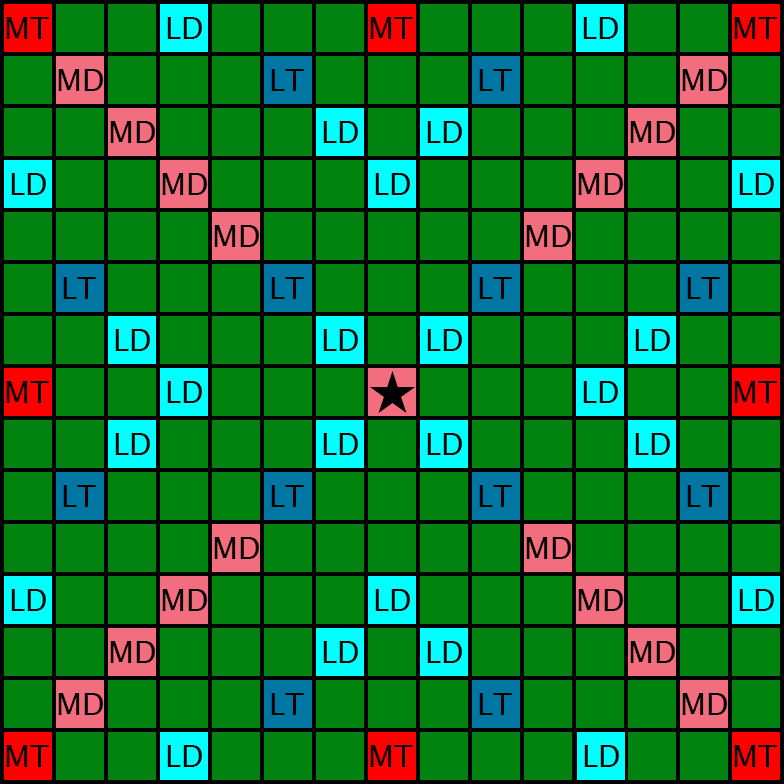
<style>
.page{position:relative;width:784px;height:784px;background:#00830f}
.page>*{position:absolute;margin:0}
.t1{font:30px "LucidaSansUnicode";color:#000000}
</style>
<div class="page">
<p class="t1" style="left:6px;top:17px;width:43px;height:22px">MT</p>
<p class="t1" style="left:167px;top:17px;width:35px;height:22px">LD</p>
<p class="t1" style="left:370px;top:17px;width:43px;height:22px">MT</p>
<p class="t1" style="left:583px;top:17px;width:35px;height:22px">LD</p>
<p class="t1" style="left:734px;top:17px;width:43px;height:22px">MT</p>
<p class="t1" style="left:58px;top:69px;width:45px;height:22px">MD</p>
<p class="t1" style="left:271px;top:69px;width:33px;height:22px">LT</p>
<p class="t1" style="left:479px;top:69px;width:33px;height:22px">LT</p>
<p class="t1" style="left:682px;top:69px;width:45px;height:22px">MD</p>
<p class="t1" style="left:110px;top:121px;width:45px;height:22px">MD</p>
<p class="t1" style="left:323px;top:121px;width:35px;height:22px">LD</p>
<p class="t1" style="left:427px;top:121px;width:35px;height:22px">LD</p>
<p class="t1" style="left:630px;top:121px;width:45px;height:22px">MD</p>
<p class="t1" style="left:11px;top:173px;width:35px;height:22px">LD</p>
<p class="t1" style="left:162px;top:173px;width:45px;height:22px">MD</p>
<p class="t1" style="left:375px;top:173px;width:35px;height:22px">LD</p>
<p class="t1" style="left:578px;top:173px;width:45px;height:22px">MD</p>
<p class="t1" style="left:739px;top:173px;width:35px;height:22px">LD</p>
<p class="t1" style="left:214px;top:225px;width:45px;height:22px">MD</p>
<p class="t1" style="left:526px;top:225px;width:45px;height:22px">MD</p>
<p class="t1" style="left:63px;top:277px;width:33px;height:22px">LT</p>
<p class="t1" style="left:271px;top:277px;width:33px;height:22px">LT</p>
<p class="t1" style="left:479px;top:277px;width:33px;height:22px">LT</p>
<p class="t1" style="left:687px;top:277px;width:33px;height:22px">LT</p>
<p class="t1" style="left:115px;top:329px;width:35px;height:22px">LD</p>
<p class="t1" style="left:323px;top:329px;width:35px;height:22px">LD</p>
<p class="t1" style="left:427px;top:329px;width:35px;height:22px">LD</p>
<p class="t1" style="left:635px;top:329px;width:35px;height:22px">LD</p>
<p class="t1" style="left:6px;top:381px;width:43px;height:22px">MT</p>
<p class="t1" style="left:167px;top:381px;width:35px;height:22px">LD</p>
<p class="t1" style="left:583px;top:381px;width:35px;height:22px">LD</p>
<p class="t1" style="left:734px;top:381px;width:43px;height:22px">MT</p>
<p class="t1" style="left:115px;top:433px;width:35px;height:22px">LD</p>
<p class="t1" style="left:323px;top:433px;width:35px;height:22px">LD</p>
<p class="t1" style="left:427px;top:433px;width:35px;height:22px">LD</p>
<p class="t1" style="left:635px;top:433px;width:35px;height:22px">LD</p>
<p class="t1" style="left:63px;top:485px;width:33px;height:22px">LT</p>
<p class="t1" style="left:271px;top:485px;width:33px;height:22px">LT</p>
<p class="t1" style="left:479px;top:485px;width:33px;height:22px">LT</p>
<p class="t1" style="left:687px;top:485px;width:33px;height:22px">LT</p>
<p class="t1" style="left:214px;top:537px;width:45px;height:22px">MD</p>
<p class="t1" style="left:526px;top:537px;width:45px;height:22px">MD</p>
<p class="t1" style="left:11px;top:589px;width:35px;height:22px">LD</p>
<p class="t1" style="left:162px;top:589px;width:45px;height:22px">MD</p>
<p class="t1" style="left:375px;top:589px;width:35px;height:22px">LD</p>
<p class="t1" style="left:578px;top:589px;width:45px;height:22px">MD</p>
<p class="t1" style="left:739px;top:589px;width:35px;height:22px">LD</p>
<p class="t1" style="left:110px;top:641px;width:45px;height:22px">MD</p>
<p class="t1" style="left:323px;top:641px;width:35px;height:22px">LD</p>
<p class="t1" style="left:427px;top:641px;width:35px;height:22px">LD</p>
<p class="t1" style="left:630px;top:641px;width:45px;height:22px">MD</p>
<p class="t1" style="left:58px;top:693px;width:45px;height:22px">MD</p>
<p class="t1" style="left:271px;top:693px;width:33px;height:22px">LT</p>
<p class="t1" style="left:479px;top:693px;width:33px;height:22px">LT</p>
<p class="t1" style="left:682px;top:693px;width:45px;height:22px">MD</p>
<p class="t1" style="left:6px;top:745px;width:43px;height:22px">MT</p>
<p class="t1" style="left:167px;top:745px;width:35px;height:22px">LD</p>
<p class="t1" style="left:370px;top:745px;width:43px;height:22px">MT</p>
<p class="t1" style="left:584px;top:745px;width:35px;height:22px">LD</p>
<p class="t1" style="left:734px;top:745px;width:43px;height:22px">MT</p>
</div>
